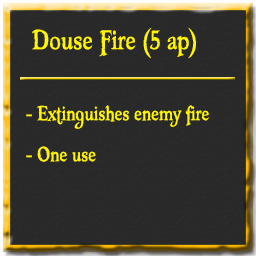
<style>
.page{position:relative;width:256px;height:256px;background:#292929}
.page>*{position:absolute;margin:0}
.t1{font:40px "Booter-ZeroZero";color:#fff600}
.t2{font:30px "Booter-ZeroZero";color:#fff600}
</style>
<div class="page">
<p class="t1" style="left:32px;top:27px;width:164px;height:32px">Douse Fire (5 ap)</p>
<p class="t2" style="left:26px;top:105px;width:183px;height:24px">- Extinguishes enemy fire</p>
<p class="t2" style="left:26px;top:146px;width:70px;height:16px">- One use</p>
</div>
